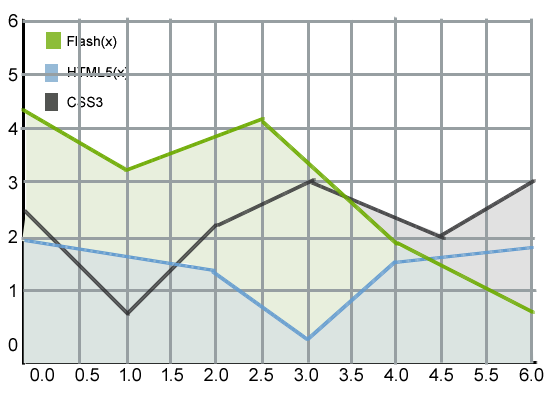
<style>
.page{position:relative;width:550px;height:400px;background:#ffffff}
.page>*{position:absolute;margin:0}
.t1{font:18px "ArialMT";color:#000000}
.t2{font:14px "ArialMT";color:#000000}
</style>
<div class="page">
<p class="t1" style="left:8px;top:14px;width:10px;height:338px;text-align:right">6  5  4  3  2  1  0</p>
<p class="t2" style="left:67px;top:36px;width:50px;height:13px">Flash(x)</p>
<p class="t2" style="left:68px;top:67px;width:61px;height:13px">HTML5(x)</p>
<p class="t2" style="left:67px;top:96px;width:36px;height:12px">CSS3</p>
<p class="t1" style="left:30px;top:368px;width:514px;height:14px">0.0    0.5    1.0    1.5    2.0    2.5    3.0    3.5    4.0    4.5    5.5    6.0</p>
</div>
